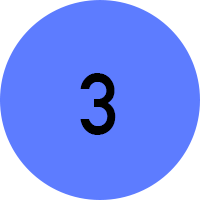
<style>
.page{position:relative;width:200px;height:200px;background:#5d7cff}
.page>*{position:absolute;margin:0}
.t1{font:85px "DINAlternate-Bold";color:#000000}
</style>
<div class="page">
<p class="t1" style="left:80px;top:73px;width:36px;height:62px">3</p>
</div>
